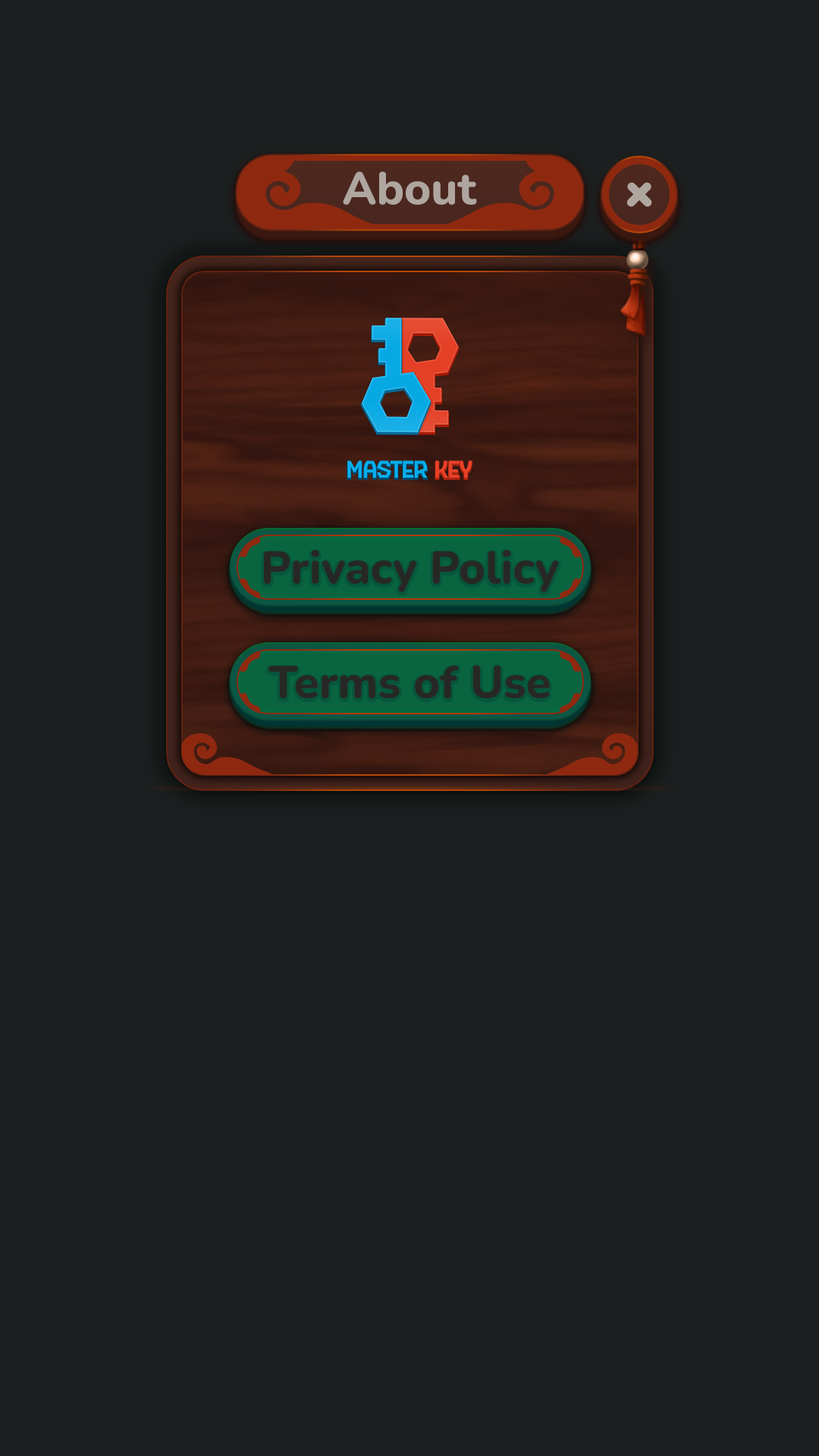
<style>
.page{position:relative;width:819px;height:1456px;background:#1c1f1f}
.page>*{position:absolute;margin:0}
.t1{font:45.5px "Nunito-ExtraBold";color:#afa6a0}
.t2{font:45.5px "Nunito-ExtraBold";color:#272825}
</style>
<div class="page">
<p class="t1" style="left:343px;top:171px;width:134px;height:34px">About</p>
<p class="t2" style="left:264px;top:550px;width:295px;height:42px">Privacy Policy</p>
<p class="t2" style="left:268px;top:665px;width:282px;height:33px">Terms of Use</p>
</div>
